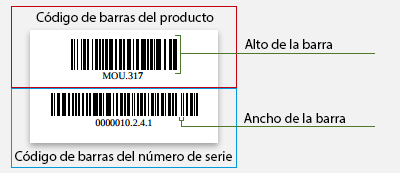
<style>
.page{position:relative;width:400px;height:173px;background:#f2f2f2}
.page>*{position:absolute;margin:0}
.t1{font:14px "MyriadPro-Regular";color:#000000}
</style>
<div class="page">
<p class="t1" style="left:36px;top:12px;width:178px;height:13px">Código de barras del producto</p>
<p class="t1" style="left:245px;top:39px;width:88px;height:10px">Alto de la barra</p>
<p class="t1" style="left:244px;top:113px;width:102px;height:10px">Ancho de la barra</p>
<p class="t1" style="left:15px;top:151px;width:217px;height:13px">Código de barras del número de serie</p>
</div>
